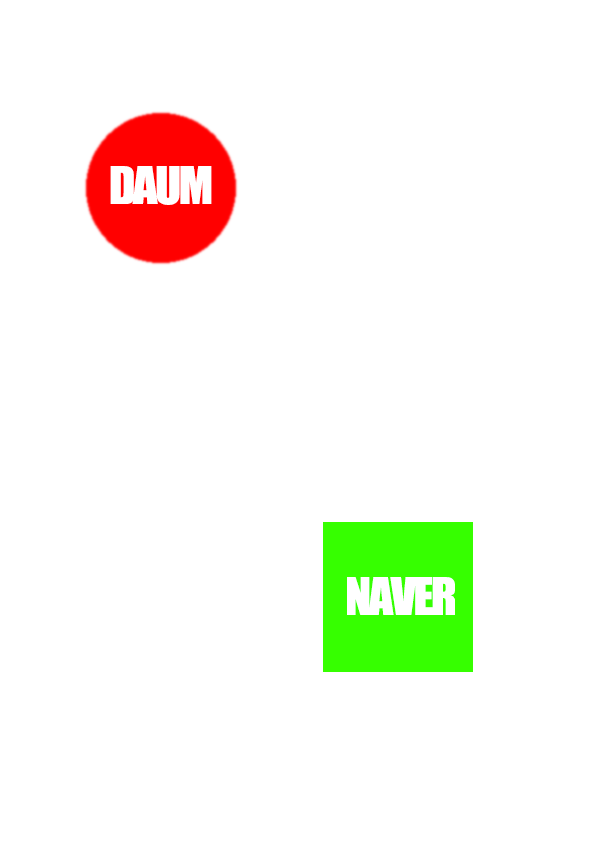
<style>
.page{position:relative;width:595px;height:842px;background:#ffffff}
.page>*{position:absolute;margin:0}
.t1{font:48px "Impact";letter-spacing:-0.05em;color:#ffffff}
</style>
<div class="page">
<p class="t1" style="left:110px;top:166px;width:102px;height:39px">DAUM</p>
<p class="t1" style="left:347px;top:577px;width:108px;height:38px">NAVER</p>
</div>
